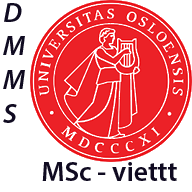
<style>
.page{position:relative;width:192px;height:192px;background:#ffffff}
.page>*{position:absolute;margin:0}
.t1{font:28px "MyriadPro-SemiboldIt";color:#100b21}
.t2{font:28px "MyriadPro-Semibold";color:#100b21}
</style>
<div class="page">
<p class="t1" style="left:3px;top:3px;width:22px;height:120px">D<br>M<br>M<br>S</p>
<p class="t2" style="left:42px;top:162px;width:135px;height:19px">MSc - viettt</p>
</div>
